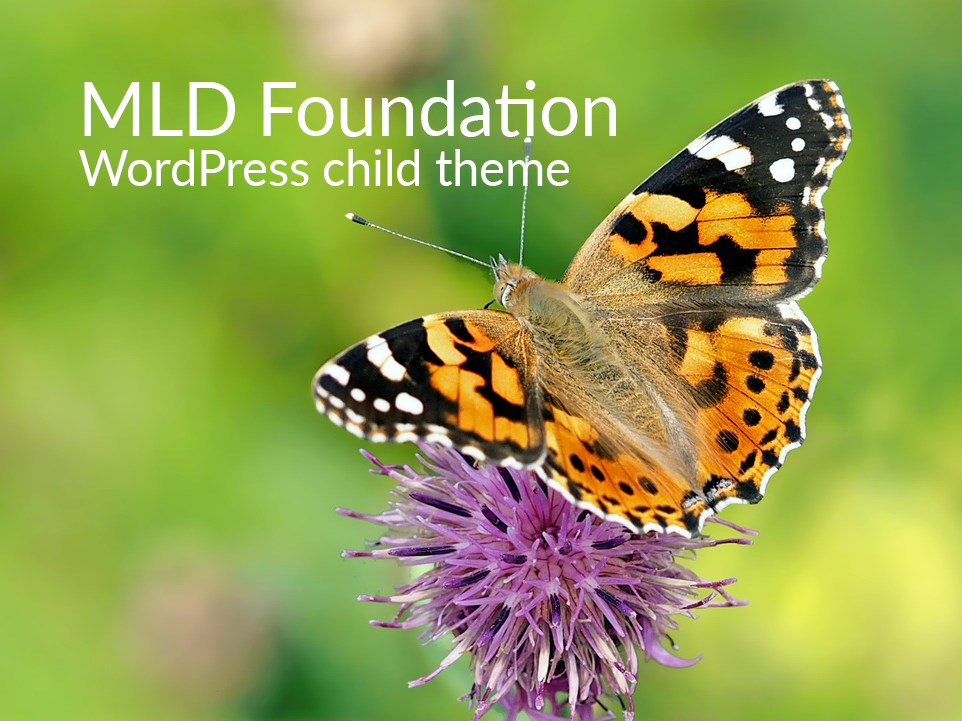
<style>
.page{position:relative;width:962px;height:721px}
.page>*{position:absolute;margin:0}
.t1{font:50px/50px "Lato-Regular";color:#ffffff;scale:0.97 1}
.t2{font:75px/50px "Lato-Regular";color:#ffffff;scale:0.97 1}
</style>
<div class="page">
<p class="t1" style="left:78px;top:80px;width:538px;height:106px"><span class="t2">MLD Foundation<br></span>WordPress child theme</p>
</div>
